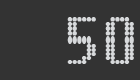
<style>
.page{position:relative;width:140px;height:80px;background:#333333}
.page>*{position:absolute;margin:0}
.t1{font:66px "14LED-Regular";color:#d7d9db}
</style>
<div class="page">
<p class="t1" style="left:67px;top:17px;width:67px;height:47px">50</p>
</div>
